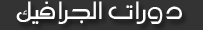
<style>
.page{position:relative;width:203px;height:30px;background:#333333}
.page>*{position:absolute;margin:0}
.t1{font:36px "MO_Nawel";letter-spacing:-0.08em;color:#ffffff}
</style>
<div class="page">
<p class="t1" style="left:16px;top:1px;width:166px;height:23px">د و را ت  ا لجرا فيك</p>
</div>
